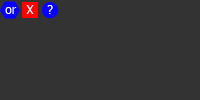
<style>
.page{position:relative;width:200px;height:100px;background:#333333}
.page>*{position:absolute;margin:0}
.t1{font:12px "Tahoma";color:#ffffff}
</style>
<div class="page">
<p class="t1" style="left:26px;top:5px;width:8px;height:9px">X</p>
<p class="t1" style="left:47px;top:5px;width:6px;height:9px">?</p>
<p class="t1" style="left:5px;top:7px;width:12px;height:7px">or</p>
</div>
